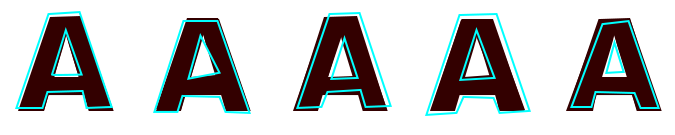
<style>
.page{position:relative;width:675px;height:135px;background:#ffffff}
.page>*{position:absolute;margin:0}
.t1{font:128.3px "Futura-Bold";letter-spacing:-0.005em;color:#330000}
</style>
<div class="page">
<p class="t1" style="left:19px;top:19px;width:95px;height:92px">A</p>
<p class="t1" style="left:156px;top:19px;width:95px;height:92px">A</p>
<p class="t1" style="left:293px;top:19px;width:95px;height:92px">A</p>
<p class="t1" style="left:430px;top:19px;width:95px;height:92px">A</p>
<p class="t1" style="left:567px;top:19px;width:95px;height:92px">A</p>
</div>
